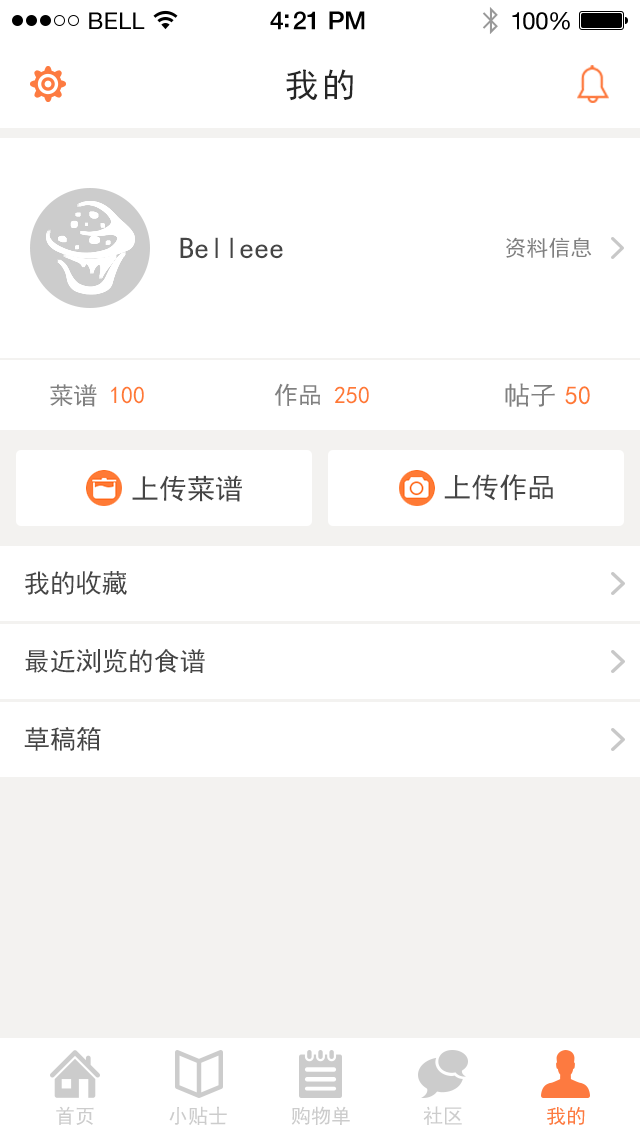
<style>
.page{position:relative;width:640px;height:1136px;background:#ffffff}
.page>*{position:absolute;margin:0}
.t1{font:23px "HelveticaNeue";letter-spacing:0.02em;color:#000000}
.t2{font:25px "HelveticaNeue-Medium";letter-spacing:-0.02em;color:#000000}
.t3{font:24px "HelveticaNeue";letter-spacing:-0.02em;color:#010101}
.t4{font:34px "SimHei";letter-spacing:0.1em;color:#262626}
.t5{font:30px "SimHei";color:#454545}
.t6{font:22px "SimHei";color:#808080}
.t7{font:24px "SimHei";color:#808080}
.t8{font:24px "SimHei";color:#ff7a35}
.t9{font:26px "SimHei";color:#808080}
.t10{font:26px "SimHei";color:#ff7a35}
.t11{font:28px "SimHei";color:#454545}
.t12{font:26px "SimHei";color:#454545}
</style>
<div class="page">
<p class="t1" style="left:89px;top:12px;width:56px;height:17px">BELL</p>
<p class="t2" style="left:270px;top:11px;width:95px;height:19px">4:21 PM</p>
<p class="t3" style="left:512px;top:12px;width:58px;height:18px">100%</p>
<p class="t4" style="left:286px;top:69px;width:67px;height:32px">我的</p>
<p class="t5" style="left:180px;top:237px;width:103px;height:22px">Belleee</p>
<p class="t6" style="left:506px;top:237px;width:86px;height:21px">资料信息</p>
<p class="t7" style="left:50px;top:384px;width:47px;height:23px">菜谱</p>
<p class="t8" style="left:111px;top:386px;width:33px;height:18px">100</p>
<p class="t7" style="left:274px;top:383px;width:46px;height:23px">作品</p>
<p class="t8" style="left:334px;top:386px;width:35px;height:18px">250</p>
<p class="t9" style="left:505px;top:383px;width:50px;height:24px">帖子</p>
<p class="t10" style="left:565px;top:386px;width:25px;height:19px">50</p>
<p class="t11" style="left:132px;top:475px;width:110px;height:27px">上传菜谱</p>
<p class="t11" style="left:444px;top:474px;width:109px;height:27px">上传作品</p>
<p class="t12" style="left:25px;top:571px;width:102px;height:24px">我的收藏</p>
<p class="t12" style="left:25px;top:648px;width:180px;height:25px">最近浏览的食谱</p>
<p class="t12" style="left:24px;top:726px;width:77px;height:25px">草稿箱</p>
</div>
